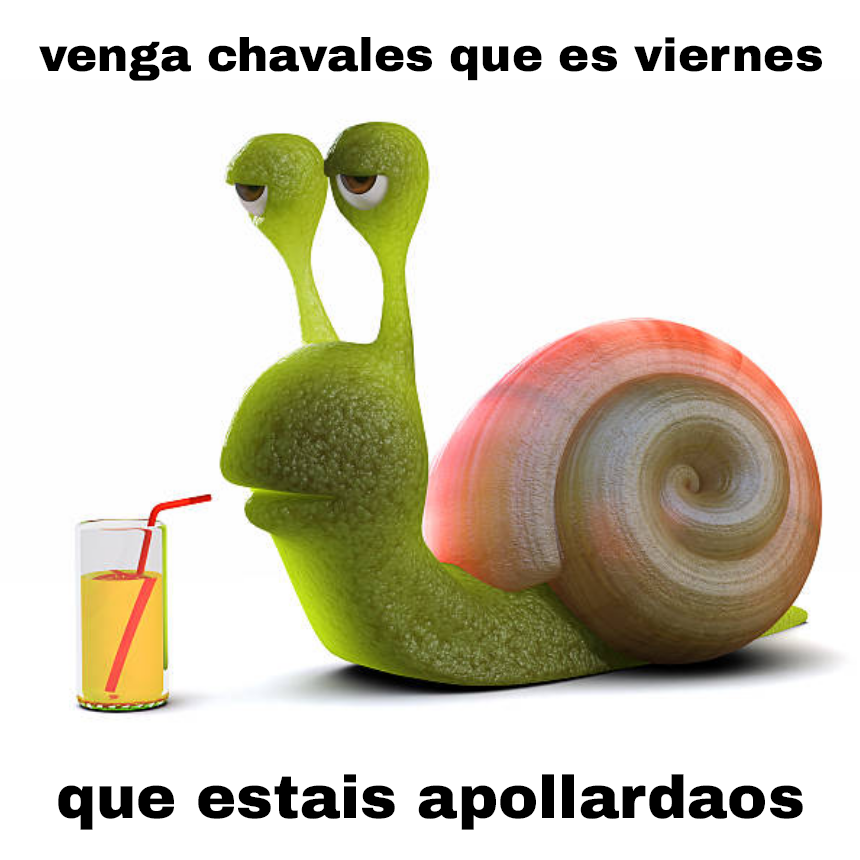
<style>
.page{position:relative;width:860px;height:860px;background:#fefefe}
.page>*{position:absolute;margin:0}
.t1{font:46.8px "ArchivoBlack-Regular";color:#000000}
.t2{font:60.3px "ArchivoBlack-Regular";color:#000000}
</style>
<div class="page">
<p class="t1" style="left:39px;top:37px;width:783px;height:44px">venga chavales que es viernes</p>
<p class="t2" style="left:58px;top:774px;width:745px;height:56px">que estais apollardaos</p>
</div>
